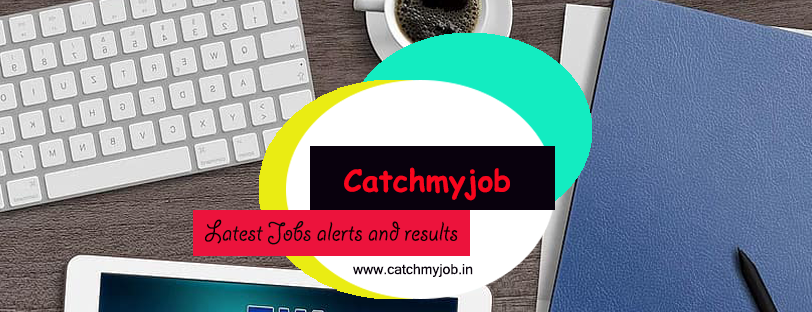
<style>
.page{position:relative;width:812px;height:312px}
.page>*{position:absolute;margin:0}
.t1{font:30px "ComicSansMS-Bold";color:#f8061d}
.t2{font:30px "GiddyupStd";color:#0a0101}
.t3{font:30px "GiddyupStd";color:#080001}
.t4{font:30px "GiddyupStd";color:#070707}
.t5{font:18px "MicrosoftSansSerif";color:#f8061d}
.t6{font:30px "MicrosoftSansSerif";color:#f8061d}
.t7{font:14px "MicrosoftSansSerif";color:#09010c}
</style>
<div class="page">
<p class="t1" style="left:344px;top:167px;width:166px;height:34px">Catchmyjob</p>
<p class="t2" style="left:205px;top:219px;width:253px;height:26px"><span class="t3">L</span><span class="t4">atest Jobs </span>alerts and results <span class="t5">re</span><span class="t6">sults</span></p>
<p class="t7" style="left:353px;top:264px;width:120px;height:13px">www.catchmyjob.in</p>
</div>
